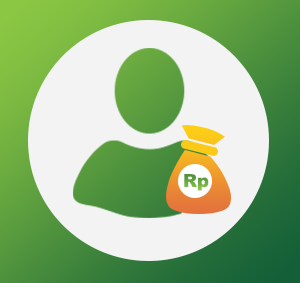
<style>
.page{position:relative;width:300px;height:283px;background:#f3f3f3}
.page>*{position:absolute;margin:0}
.t1{font:18.1px "Arial-Black";color:#67a840}
</style>
<div class="page">
<p class="t1" style="left:184px;top:174px;width:25px;height:17px">Rp</p>
</div>
